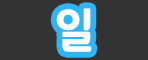
<style>
.page{position:relative;width:148px;height:60px;background:#333333}
.page>*{position:absolute;margin:0}
.t1{font:48px "12LotteMartHappyBold";letter-spacing:0.05em;color:#ffffff;text-transform:uppercase}
</style>
<div class="page">
<p class="t1" style="left:56px;top:8px;width:36px;height:44px">일</p>
</div>
